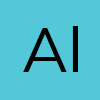
<style>
.page{position:relative;width:100px;height:100px;background:#52c8d9}
.page>*{position:absolute;margin:0}
.t1{font:62.5px "Muli-Regular";color:#000000}
</style>
<div class="page">
<p class="t1" style="left:23px;top:26px;width:55px;height:46px">Al</p>
</div>
